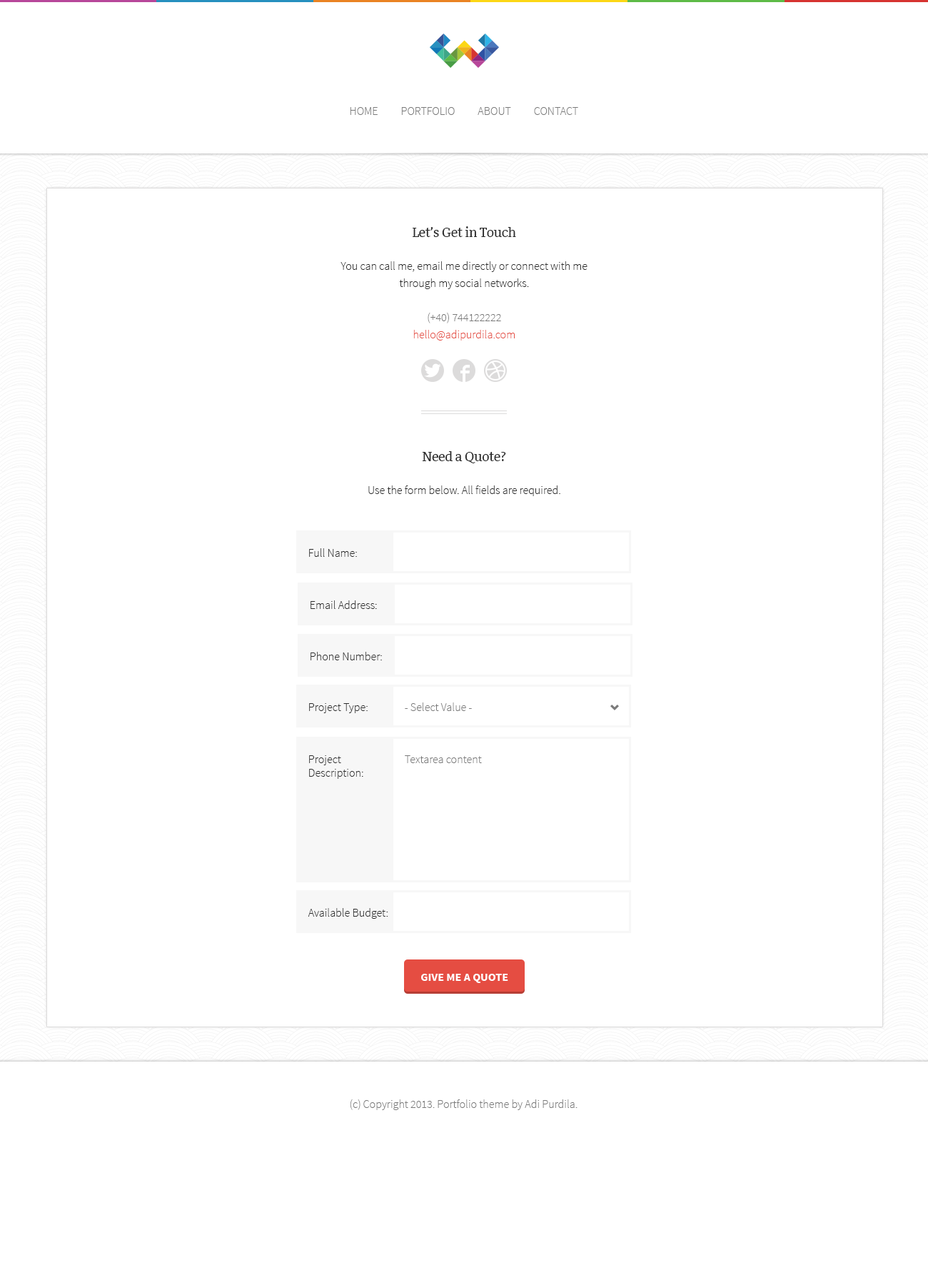
<style>
.page{position:relative;width:928px;height:1285px;background:#ffffff}
.page>*{position:absolute;margin:0}
.t1{font:11.4px "SourceSansPro-Light";color:#7a7a7a;text-transform:uppercase}
.t2{font:11.4px/17.1px "SourceSansPro-Light";color:#2b2b2b}
.t3{font:12.8px "Bitter-Regular";letter-spacing:-0.025em;color:#2b2b2b}
.t4{font:11.4px/17.1px "SourceSansPro-Light";color:#7a7a7a}
.t5{font:11.4px/17.1px "SourceSansPro-Light";color:#e54d42}
.t6{font:11.4px "SourceSansPro-Light";color:#2b2b2b}
.t7{font:11.4px "SourceSansPro-Light";color:#7a7a7a}
.t8{font:11.4px "SourceSansPro-Bold";color:#ffffff;text-transform:uppercase}
</style>
<div class="page">
<p class="t1" style="left:350px;top:107px;width:228px;height:8px">Home          Portfolio          About          Contact</p>
<p class="t2" style="left:341px;top:226px;width:247px;height:115px;text-align:center"><span class="t3">Let’s Get in Touch<br><br></span>You can call me, email me directly or connect with me through my social networks.<br><br><span class="t4">(+40) 744122222<br></span><span class="t5">hello@adipurdila.com</span></p>
<p class="t2" style="left:368px;top:451px;width:192px;height:45px;text-align:center"><span class="t3">Need a Quote?<br><br></span>Use the form below. All fields are required.</p>
<p class="t6" style="left:309px;top:548px;width:48px;height:9px">Full Name:</p>
<p class="t6" style="left:311px;top:600px;width:66px;height:9px">Email Address:</p>
<p class="t6" style="left:311px;top:652px;width:71px;height:8px">Phone Number:</p>
<p class="t6" style="left:309px;top:703px;width:59px;height:10px">Project Type:</p>
<p class="t7" style="left:405px;top:702px;width:67px;height:9px">- Select Value -</p>
<p class="t6" style="left:309px;top:755px;width:54px;height:24px">Project<br>Description:</p>
<p class="t7" style="left:405px;top:755px;width:77px;height:8px">Textarea content</p>
<p class="t6" style="left:308px;top:908px;width:80px;height:11px">Available Budget:</p>
<p class="t8" style="left:421px;top:974px;width:87px;height:9px">Give me a quote</p>
<p class="t7" style="left:350px;top:1099px;width:228px;height:11px">(c) Copyright 2013. Portfolio theme by Adi Purdila.</p>
</div>
